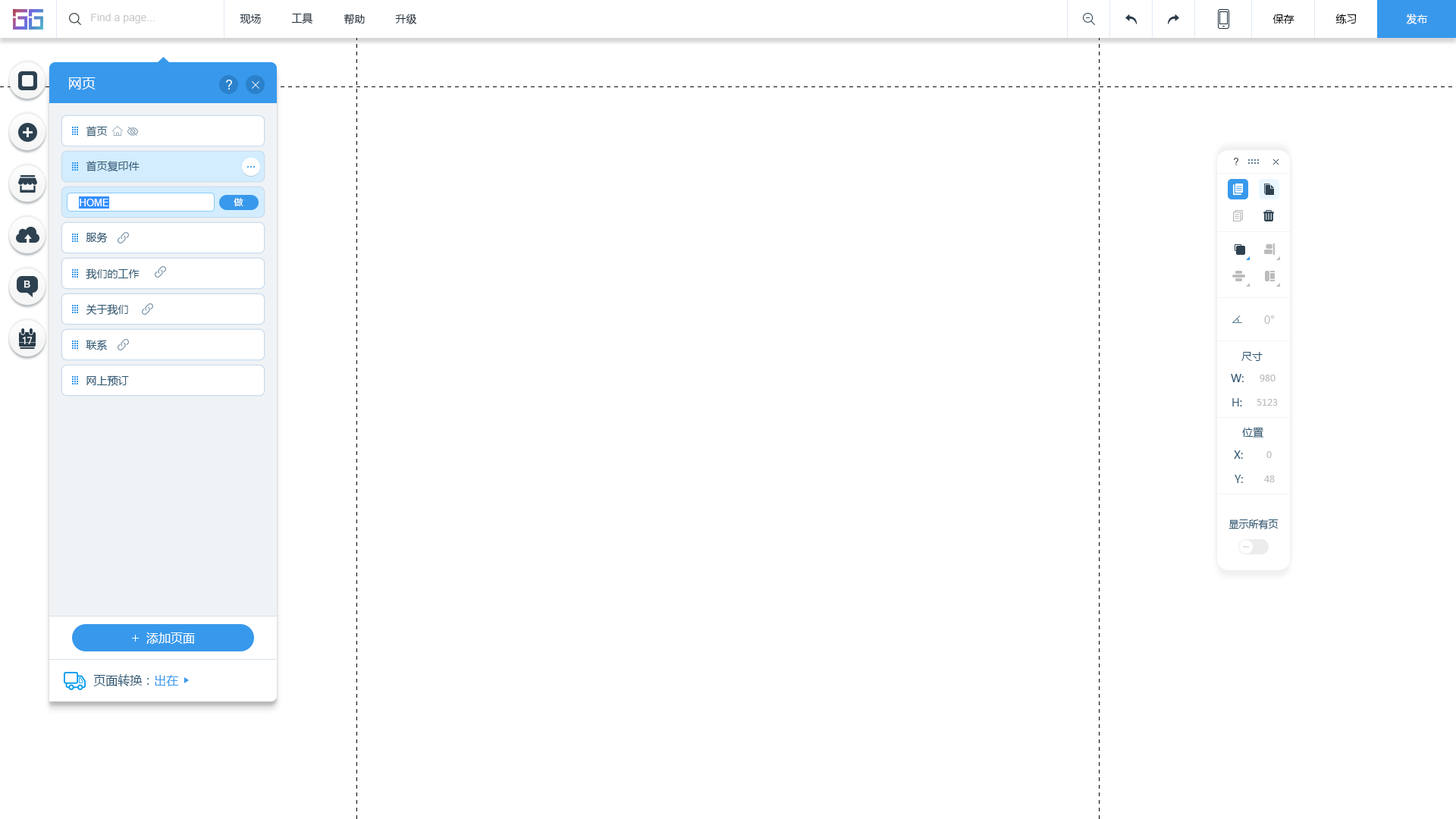
<style>
.page{position:relative;width:1456px;height:819px;background:#ffffff}
.page>*{position:absolute;margin:0}
.t1{font:10.6px "ArialMT";color:#cccccc}
.t2{font:10.6px "MicrosoftYaHei";color:#20303c}
.t3{font:10.6px "MicrosoftYaHei";color:#000000}
.t4{font:10.6px "MicrosoftYaHei";color:#ffffff}
.t5{font:13.6px "MicrosoftYaHei";color:#ffffff}
.t6{font:10.6px "MicrosoftYaHei";color:#2b5672}
.t7{font:9.1px "MicrosoftYaHei";color:#ffffff}
.t8{font:9.9px "ArialMT";color:#ffffff}
.t9{font:10.6px "MicrosoftYaHei";color:#bcbcbc}
.t10{font:9.1px "MicrosoftYaHei";color:#bcbcbc}
.t11{font:9.9px "MicrosoftYaHei";color:#2b5672}
.t12{font:12.1px "MicrosoftYaHei";color:#ffffff}
.t13{font:9.1px "MicrosoftYaHei";color:#2b5672}
.t14{font:9.1px "MicrosoftYaHei";color:#3899ec}
</style>
<div class="page">
<p class="t1" style="left:91px;top:14px;width:64px;height:10px">Find a page...</p>
<p class="t2" style="left:240px;top:14px;width:21px;height:10px">现场</p>
<p class="t2" style="left:291px;top:13px;width:22px;height:11px">工具</p>
<p class="t2" style="left:344px;top:14px;width:21px;height:11px">帮助</p>
<p class="t2" style="left:395px;top:14px;width:22px;height:10px">升级</p>
<p class="t3" style="left:1272px;top:14px;width:22px;height:10px">保存</p>
<p class="t3" style="left:1335px;top:14px;width:22px;height:10px">练习</p>
<p class="t4" style="left:1406px;top:14px;width:22px;height:10px">发布</p>
<p class="t5" style="left:69px;top:77px;width:27px;height:12px">网页</p>
<p class="t6" style="left:86px;top:126px;width:22px;height:10px">首页</p>
<p class="t6" style="left:86px;top:161px;width:54px;height:11px">首页复印件</p>
<p class="t7" style="left:234px;top:198px;width:9px;height:8px">做</p>
<p class="t8" style="left:80px;top:199px;width:29px;height:7px">HOME</p>
<p class="t6" style="left:86px;top:232px;width:22px;height:11px">服务</p>
<p class="t6" style="left:86px;top:268px;width:54px;height:12px">我们的工作</p>
<p class="t6" style="left:86px;top:304px;width:42px;height:11px">关于我们</p>
<p class="t9" style="left:1264px;top:315px;width:11px;height:9px">0°</p>
<p class="t6" style="left:86px;top:340px;width:21px;height:10px">联系</p>
<p class="t6" style="left:1241px;top:352px;width:22px;height:9px">尺寸</p>
<p class="t6" style="left:86px;top:375px;width:43px;height:11px">网上预订</p>
<p class="t6" style="left:1231px;top:374px;width:13px;height:8px">W:</p>
<p class="t10" style="left:1260px;top:375px;width:15px;height:6px">980</p>
<p class="t6" style="left:1232px;top:398px;width:10px;height:8px">H:</p>
<p class="t10" style="left:1257px;top:399px;width:21px;height:7px">5123</p>
<p class="t6" style="left:1242px;top:427px;width:22px;height:11px">位置</p>
<p class="t6" style="left:1234px;top:450px;width:9px;height:9px">X:</p>
<p class="t10" style="left:1266px;top:451px;width:6px;height:7px">0</p>
<p class="t6" style="left:1235px;top:475px;width:8px;height:8px">Y:</p>
<p class="t10" style="left:1264px;top:475px;width:11px;height:7px">48</p>
<p class="t11" style="left:1228px;top:519px;width:51px;height:10px">显示所有页</p>
<p class="t12" style="left:146px;top:632px;width:49px;height:12px">添加页面</p>
<p class="t13" style="left:93px;top:674px;width:86px;height:12px">页面转换：<span class="t14">出在</span></p>
</div>
